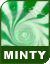
<style>
.page{position:relative;width:50px;height:64px}
.page>*{position:absolute;margin:0}
.t1{font:11px "Arial-Black";letter-spacing:0.05em;color:#ffffff}
</style>
<div class="page">
<p class="t1" style="left:4px;top:51px;width:42px;height:8px">MINTY</p>
</div>
